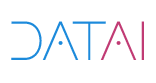
<style>
.page{position:relative;width:156px;height:83px;background:#ffffff}
.page>*{position:absolute;margin:0}
.t1{font:55px "averox";color:#1c8adb}
.t2{font:55px "averox";color:#c13b74}
.t3{font:48px "averox";color:#1c8adb}
.t4{font:48px "averox";color:#c13b74}
</style>
<div class="page">
<p class="t1" style="left:11px;top:21px;width:133px;height:39px">dat<span class="t2">ai</span></p>
<p class="t3" style="left:58px;top:41px;width:5px;height:4px">.</p>
<p class="t4" style="left:116px;top:41px;width:5px;height:4px">.</p>
</div>
